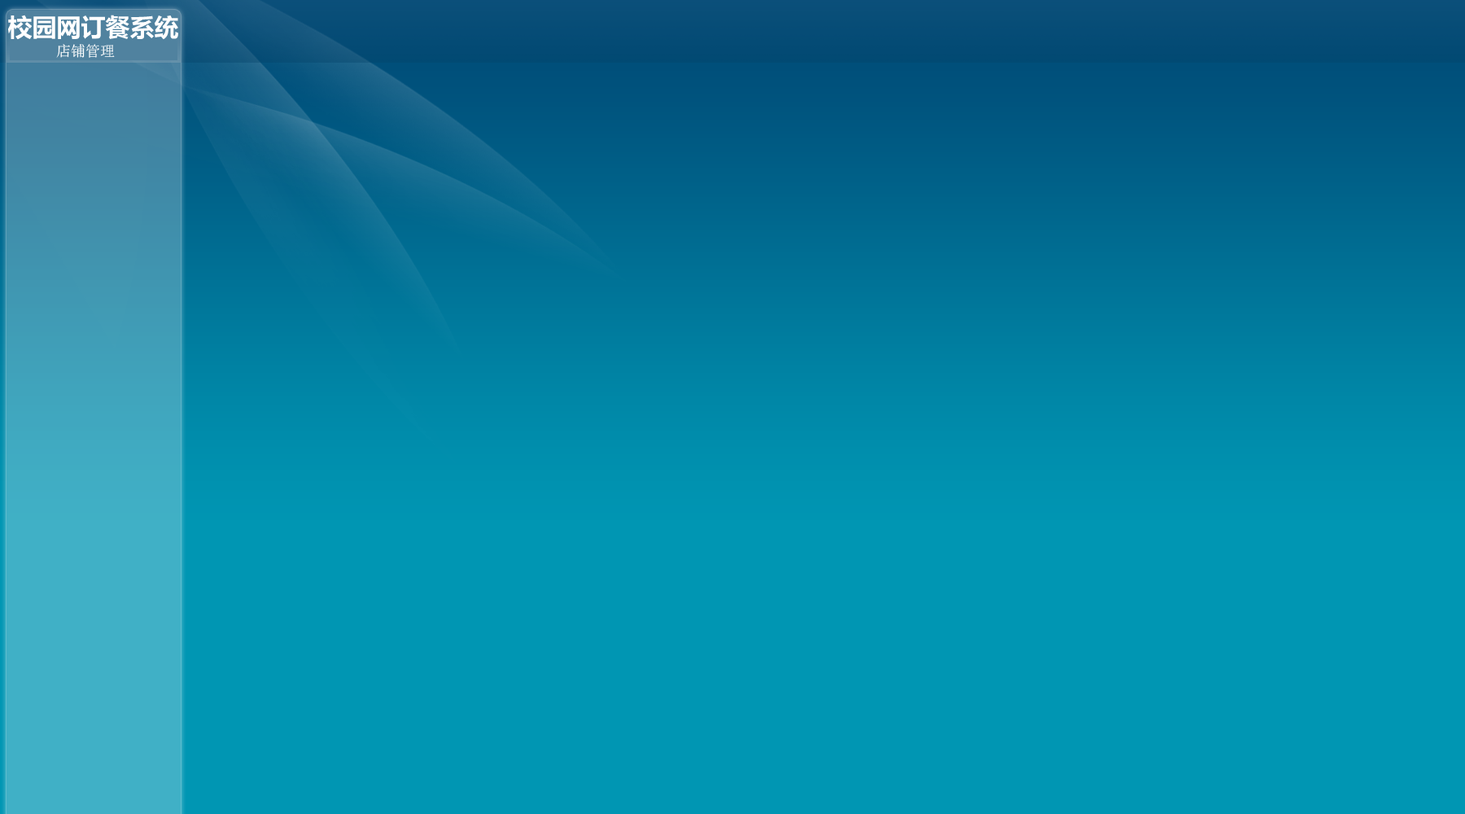
<style>
.page{position:relative;width:1465px;height:814px;background:#0096b3}
.page>*{position:absolute;margin:0}
.t1{font:24.4px "MicrosoftYaHei-Bold";color:#ffffff}
.t2{font:14.7px "NSimSun";color:#ffffff}
</style>
<div class="page">
<p class="t1" style="left:8px;top:15px;width:170px;height:25px">校园网订餐系统</p>
<p class="t2" style="left:56px;top:44px;width:59px;height:14px">店铺管理</p>
</div>
